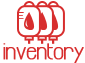
<style>
.page{position:relative;width:85px;height:63px;background:#ffffff}
.page>*{position:absolute;margin:0}
.t1{font:22.3px "Infinity";letter-spacing:-0.02em;color:#d72e2e;font-weight:bold}
</style>
<div class="page">
<p class="t1" style="left:3px;top:43px;width:81px;height:21px">inventory</p>
</div>
